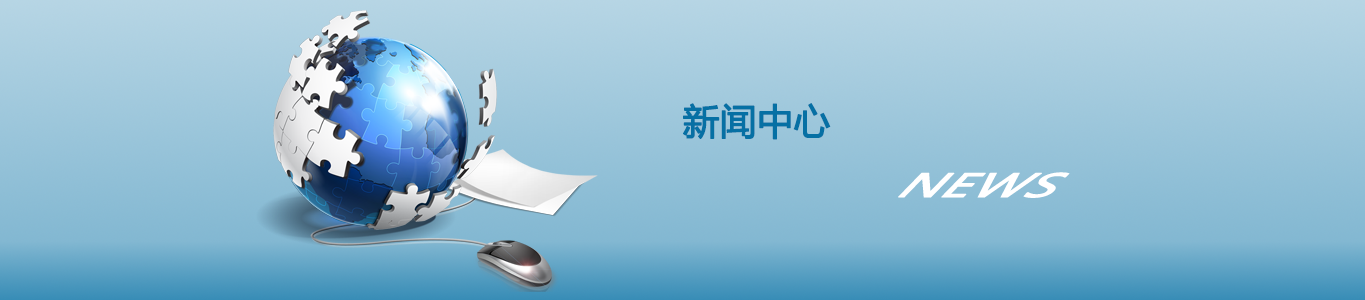
<style>
.page{position:relative;width:1365px;height:300px}
.page>*{position:absolute;margin:0}
.t1{font:36px "MicrosoftYaHei";color:#0670a4;font-weight:bold}
.t2{font:38px "MicrosoftYaHei";color:#ffffff;font-weight:bold;font-style:italic;scale:1.35 1}
</style>
<div class="page">
<p class="t1" style="left:683px;top:103px;width:148px;height:37px">新闻中心</p>
<p class="t2" style="left:898px;top:172px;width:172px;height:26px">NEWS</p>
</div>
